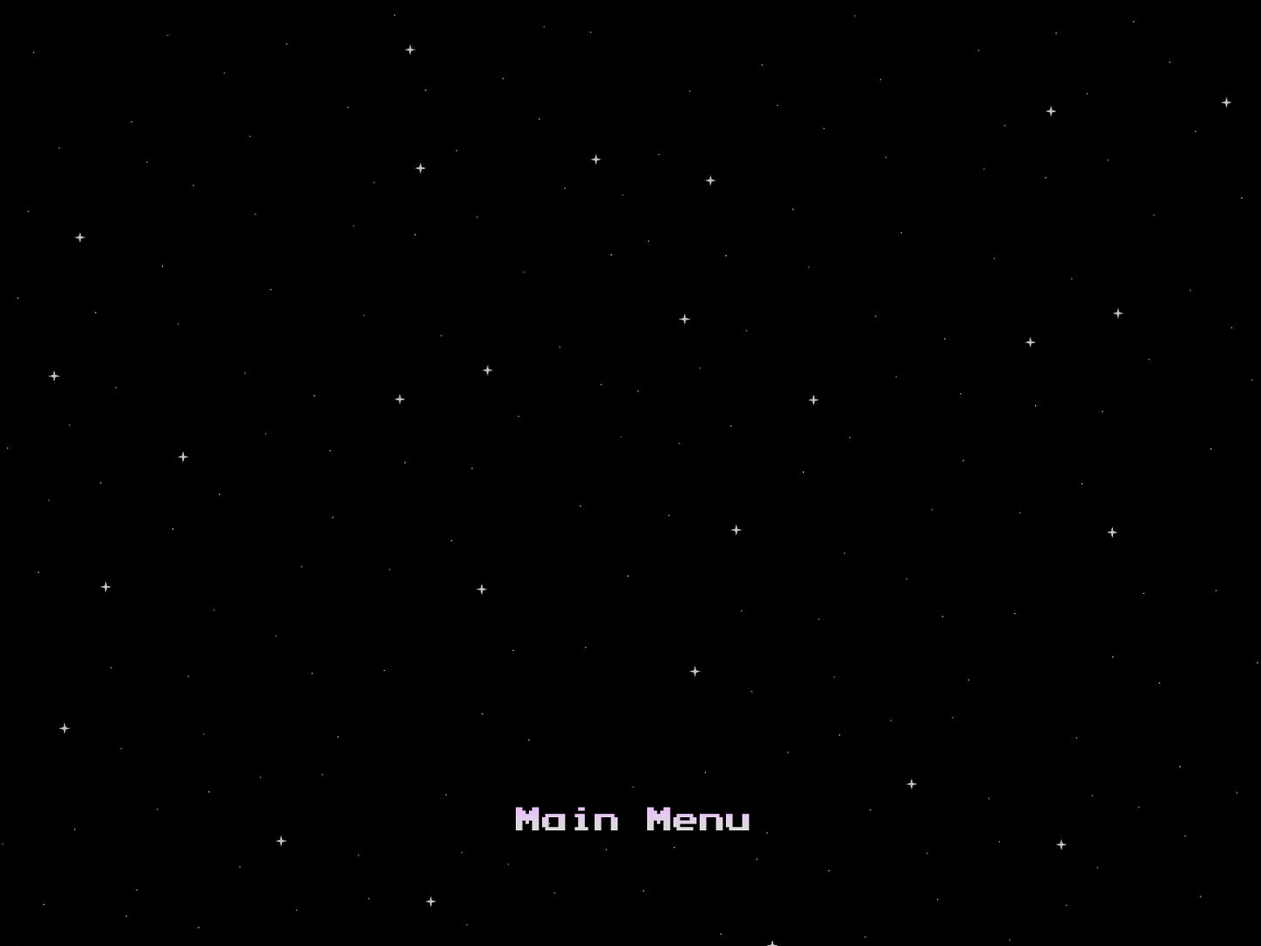
<style>
.page{position:relative;width:1261px;height:946px;background:#000000}
.page>*{position:absolute;margin:0}
.t1{font:26.3px "PressStartK";color:#e2d1e8}
</style>
<div class="page">
<p class="t1" style="left:516px;top:806px;width:234px;height:24px">Main Menu</p>
</div>
